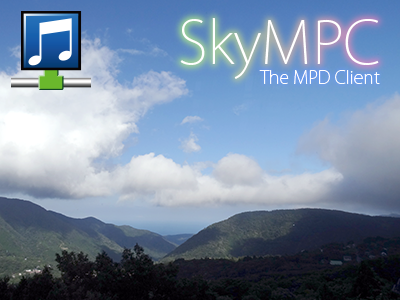
<style>
.page{position:relative;width:400px;height:300px}
.page>*{position:absolute;margin:0}
.t1{font:58.4px "KozGoPr6N-ExtraLight";color:#fffefe}
.t2{font:17.7px "KozGoPr6N-ExtraLight";color:#fffefe}
</style>
<div class="page">
<p class="t1" style="left:180px;top:18px;width:199px;height:61px">SkyMPC</p>
<p class="t2" style="left:259px;top:70px;width:121px;height:14px">The MPD Client</p>
</div>
